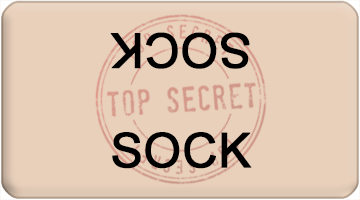
<style>
.page{position:relative;width:360px;height:200px;background:#e8d0bb}
.page>*{position:absolute;margin:0}
.t1{font:48px "ArialMT";color:#000000;font-weight:bold}
</style>
<div class="page">
<p class="t1" style="left:110px;top:32px;width:140px;height:37px;rotate:180deg">SOCK</p>
<p class="t1" style="left:112px;top:132px;width:140px;height:37px">SOCK</p>
</div>
